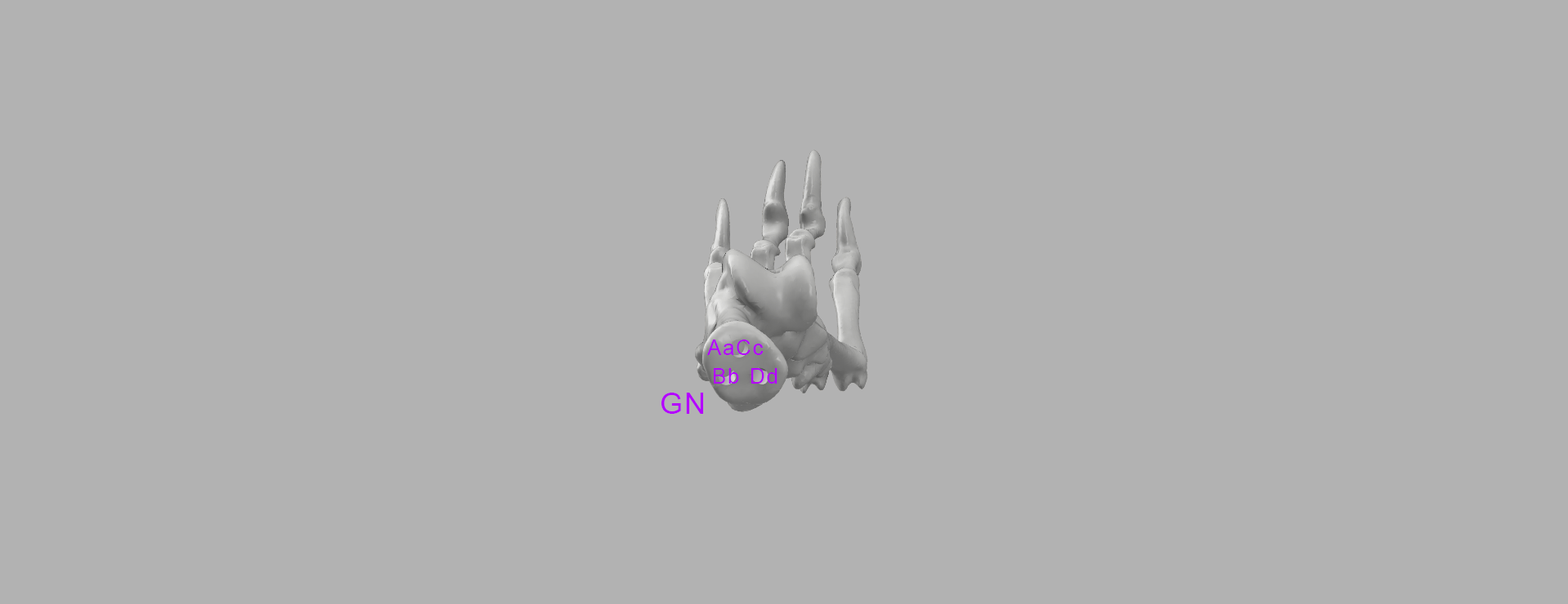
<style>
.page{position:relative;width:1568px;height:604px;background:#b2b2b2}
.page>*{position:absolute;margin:0}
.t1{font:21.2px "ArialMT";letter-spacing:0.06em;color:#b400ff}
.t2{font:29.4px "ArialMT";letter-spacing:0.06em;color:#b400ff}
</style>
<div class="page">
<p class="t1" style="left:707px;top:340px;width:57px;height:15px">AaCc</p>
<p class="t1" style="left:714px;top:368px;width:25px;height:16px">Bb</p>
<p class="t1" style="left:751px;top:368px;width:26px;height:16px">Dd</p>
<p class="t2" style="left:661px;top:393px;width:42px;height:21px">GN</p>
</div>
